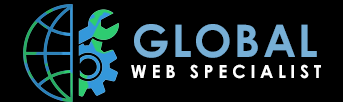
<style>
.page{position:relative;width:343px;height:102px;background:#000000}
.page>*{position:absolute;margin:0}
.t1{font:45px "CenturyGothic-Bold";letter-spacing:0.05em;color:#77afd6}
.t2{font:18px "CenturyGothic-Bold";letter-spacing:0.25em;color:#ffffff}
</style>
<div class="page">
<p class="t1" style="left:134px;top:24px;width:183px;height:34px">GLOBAL</p>
<p class="t2" style="left:131px;top:64px;width:190px;height:15px">WEB SPECIALIST</p>
</div>
